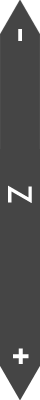
<style>
.page{position:relative;width:40px;height:400px;background:#454545}
.page>*{position:absolute;margin:0}
.t1{font:36px "CaviarDreams-Bold";letter-spacing:-0.08em;color:#ffffff}
.t2{font:30px "CaviarDreams-Bold";letter-spacing:-0.08em;color:#ffffff}
</style>
<div class="page">
<p class="t1" style="left:18px;top:29px;width:4px;height:12px;rotate:-90deg">-</p>
<p class="t2" style="left:8px;top:185px;width:24px;height:18px;rotate:-90deg">Z</p>
<p class="t1" style="left:13px;top:348px;width:16px;height:16px">+</p>
</div>
